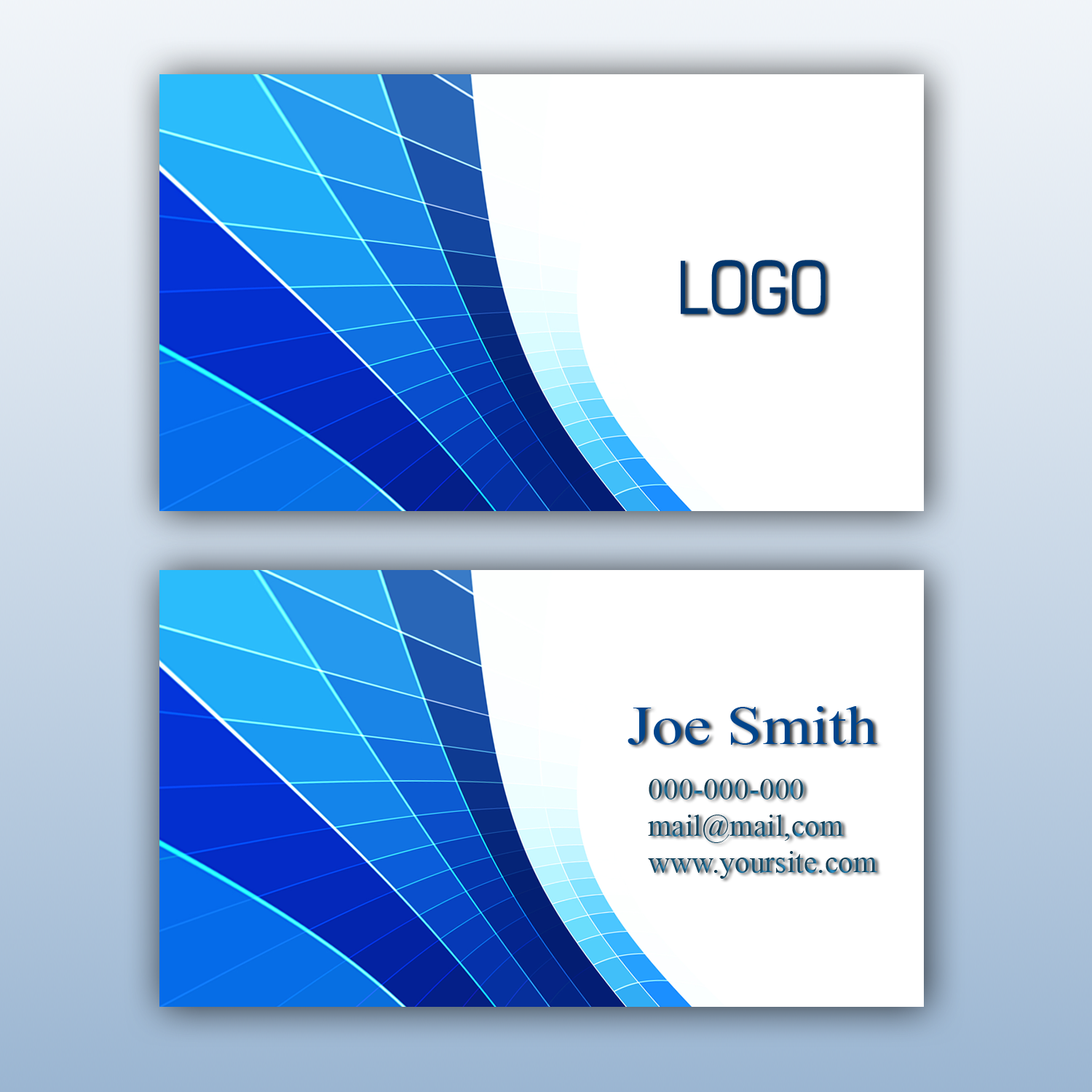
<style>
.page{position:relative;width:1092px;height:1092px;background:#ffffff}
.page>*{position:absolute;margin:0}
.t1{font:72.8px "Square721BT-Roman";color:#01366d;scale:0.74 1}
.t2{font:54.6px "TimesNewRomanPSMT";color:#01458c;scale:1.16 1}
.t3{font:30.3px "TimesNewRomanPSMT"}
</style>
<div class="page">
<p class="t1" style="left:681px;top:260px;width:145px;height:54px">LOGO</p>
<p class="t2" style="left:628px;top:706px;width:249px;height:39px">Joe Smith</p>
<p class="t3" style="left:648px;top:779px;width:229px;height:100px">000-000-000<br>mail@mail,com<br>www.yoursite.com</p>
</div>
